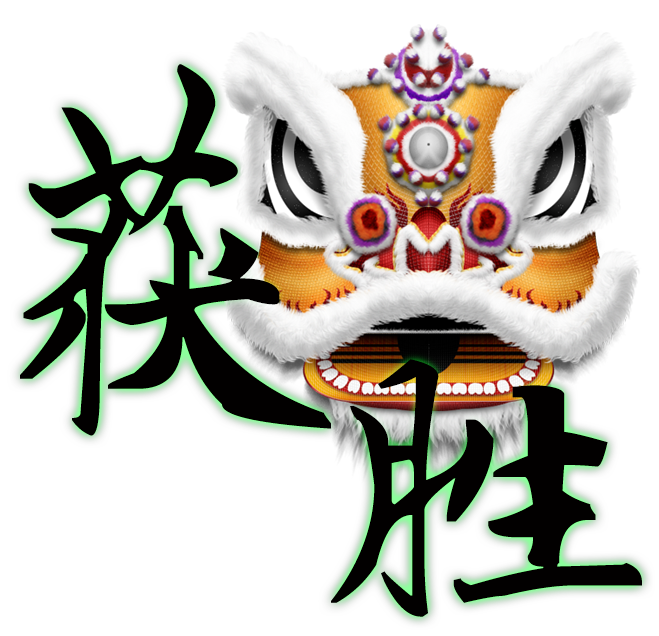
<style>
.page{position:relative;width:659px;height:636px;background:#ffffff}
.page>*{position:absolute;margin:0}
.t1{font:373.6px "SentyZHAO";color:#020000}
</style>
<div class="page">
<p class="t1" style="left:20px;top:64px;width:311px;height:372px">获</p>
<p class="t1" style="left:331px;top:359px;width:311px;height:258px">胜</p>
</div>
